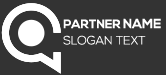
<style>
.page{position:relative;width:166px;height:75px;background:#333333}
.page>*{position:absolute;margin:0}
.t1{font:12px "NexaBold";color:#ffffff}
.t2{font:13px "NexaBold";color:#ffffff}
.t3{font:12px "NexaLight";color:#ffffff}
</style>
<div class="page">
<p class="t1" style="left:63px;top:18px;width:98px;height:11px">PARTNER <span class="t2">NAME</span></p>
<p class="t3" style="left:63px;top:35px;width:83px;height:10px">SLOGAN TEXT</p>
</div>
